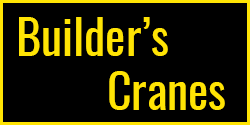
<style>
.page{position:relative;width:250px;height:125px;background:#000000}
.page>*{position:absolute;margin:0}
.t1{font:48px "Oswald-Regular";color:#ffe404}
</style>
<div class="page">
<p class="t1" style="left:19px;top:17px;width:149px;height:39px">Builder’s</p>
<p class="t1" style="left:109px;top:71px;width:116px;height:39px">Cranes</p>
</div>
